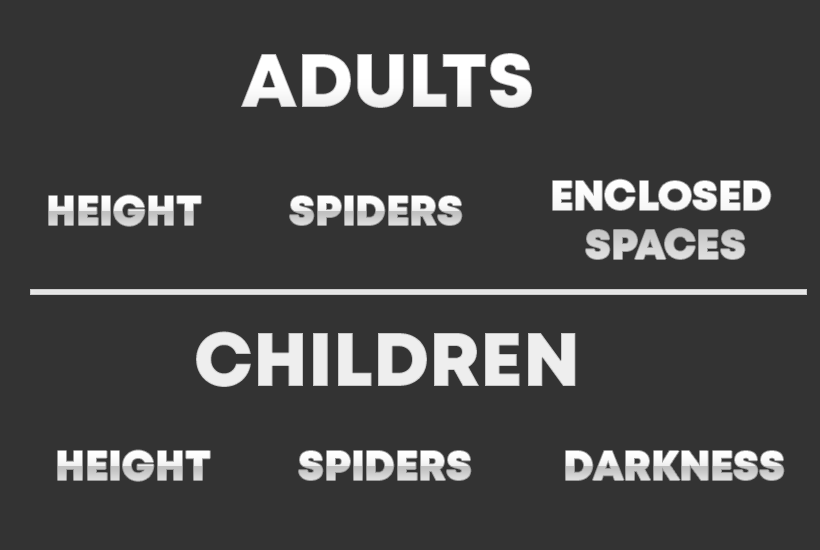
<style>
.page{position:relative;width:820px;height:550px;background:#333333}
.page>*{position:absolute;margin:0}
.t1{font:75.3px "Mont-HeavyDEMO";color:#ffffff}
.t2{font:41.1px "Mont-HeavyDEMO"}
</style>
<div class="page">
<p class="t1" style="left:241px;top:53px;width:291px;height:55px">ADULTS</p>
<p class="t2" style="left:553px;top:179px;width:218px;height:80px;text-align:center">ENCLOSED <br>SPACES</p>
<p class="t2" style="left:49px;top:195px;width:152px;height:31px">HEIGHT</p>
<p class="t2" style="left:290px;top:196px;width:172px;height:29px">SPIDERS</p>
<p class="t1" style="left:196px;top:331px;width:380px;height:56px">CHILDREN</p>
<p class="t2" style="left:58px;top:450px;width:152px;height:31px">HEIGHT</p>
<p class="t2" style="left:299px;top:451px;width:172px;height:29px">SPIDERS</p>
<p class="t2" style="left:566px;top:451px;width:218px;height:29px">DARKNESS</p>
</div>
